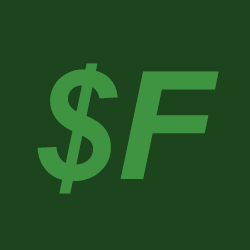
<style>
.page{position:relative;width:250px;height:250px;background:#1c441d}
.page>*{position:absolute;margin:0}
.t1{font:150px "Arial-BoldItalicMT";color:#3f9442}
</style>
<div class="page">
<p class="t1" style="left:37px;top:63px;width:182px;height:131px">$F</p>
</div>
